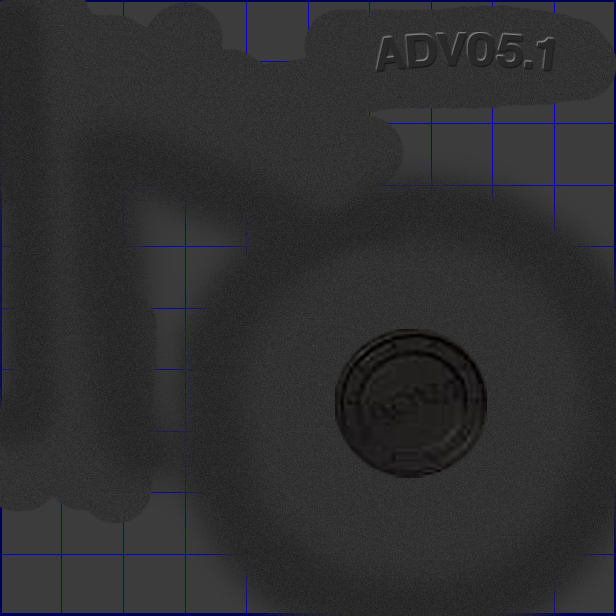
<style>
.page{position:relative;width:616px;height:616px}
.page>*{position:absolute;margin:0}
.t1{font:44.2px "HeldustryFTVBasic-Demi";color:#292929}
</style>
<div class="page">
<p class="t1" style="left:376px;top:33px;width:178px;height:38px">ADV05.1</p>
</div>
